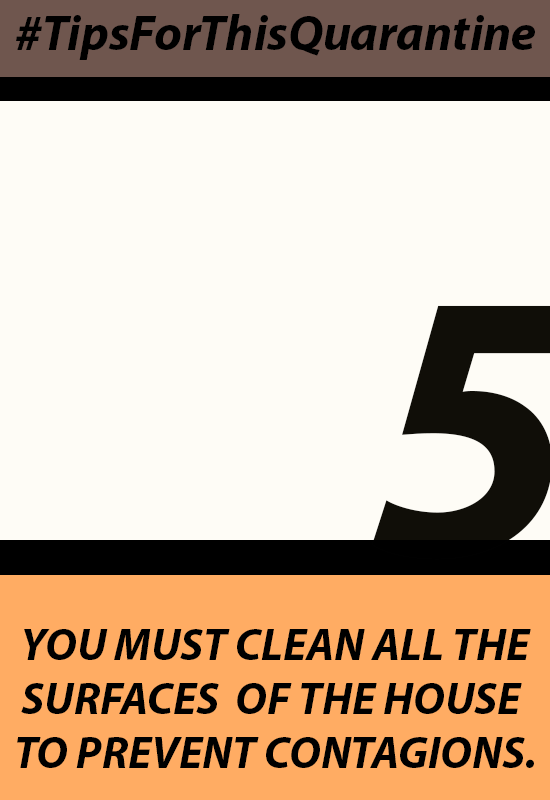
<style>
.page{position:relative;width:550px;height:800px;background:#fefcf6}
.page>*{position:absolute;margin:0}
.t1{font:50px "MyriadPro-BoldIt";color:#000000}
.t2{font:44.9px "MyriadPro-BoldIt";color:#000000}
</style>
<div class="page">
<p class="t1" style="left:16px;top:14px;width:519px;height:46px">#TipsForThisQuarantine</p>
<p class="t2" style="left:17px;top:629px;width:517px;height:139px;text-align:center">YOU MUST CLEAN ALL THE<br>SURFACES  OF THE HOUSE <br>TO PREVENT CONTAGIONS.</p>
</div>
